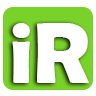
<style>
.page{position:relative;width:96px;height:96px;background:#ffffff}
.page>*{position:absolute;margin:0}
.t1{font:87.3px "BerlinSansFBDemi-Bold";color:#fffefe}
</style>
<div class="page">
<p class="t1" style="left:12px;top:23px;width:77px;height:60px">iR</p>
</div>
